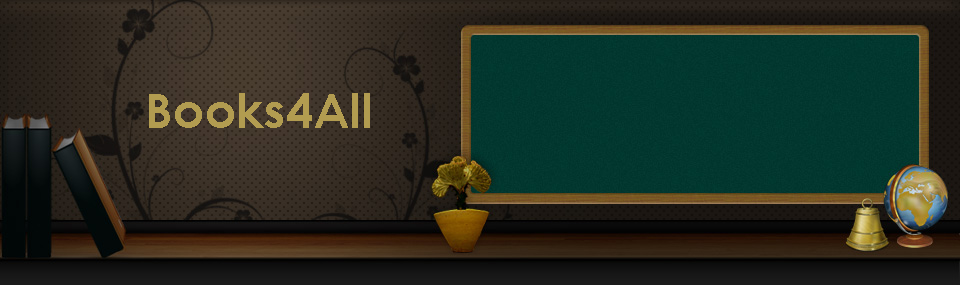
<style>
.page{position:relative;width:960px;height:285px}
.page>*{position:absolute;margin:0}
.t1{font:48px "CenturyGothic-Bold";letter-spacing:0.01em;color:#b29c50}
</style>
<div class="page">
<p class="t1" style="left:149px;top:93px;width:221px;height:35px">Books4All</p>
</div>
